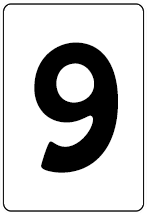
<style>
.page{position:relative;width:147px;height:213px;background:#ffffff}
.page>*{position:absolute;margin:0}
.t1{font:154.6px "HoboStd";color:#000000;scale:1.05 1}
</style>
<div class="page">
<p class="t1" style="left:34px;top:42px;width:84px;height:131px">9</p>
</div>
